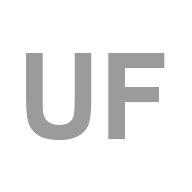
<style>
.page{position:relative;width:192px;height:192px;background:#ffffff}
.page>*{position:absolute;margin:0}
.t1{font:120px "ArialNarrow-Bold";color:#9b9b9b;scale:1.16 1}
</style>
<div class="page">
<p class="t1" style="left:26px;top:53px;width:139px;height:87px">UF</p>
</div>
